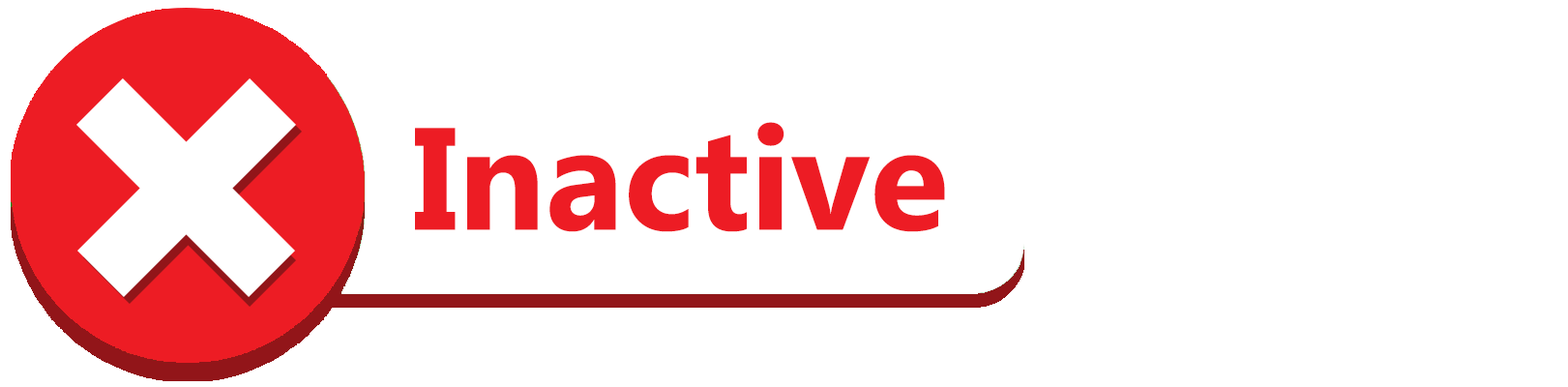
<style>
.page{position:relative;width:1568px;height:387px;background:#ffffff}
.page>*{position:absolute;margin:0}
.t1{font:145.1px "MicrosoftPhagsPa-Bold";color:#ed1c24}
</style>
<div class="page">
<p class="t1" style="left:415px;top:122px;width:530px;height:110px">Inactive</p>
</div>
